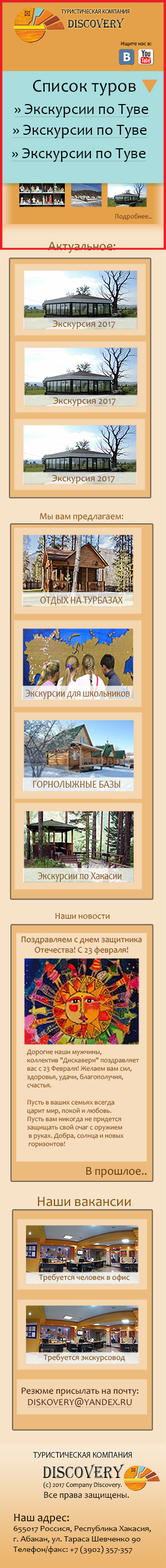
<style>
.page{position:relative;width:166px;height:1568px}
.page>*{position:absolute;margin:0}
.t1{font:5.9px "MyriadPro-Regular";color:#201708;scale:0.91 1}
.t2{font:11.8px "Algerian";color:#201708;scale:0.91 1}
.t3{font:5.6px "Candara"}
.t4{font:18.1px "Candara";color:#000000}
.t5{font:15.6px "Candara";color:#000000;text-decoration:underline}
.t6{font:6.9px "Candara";color:#753825}
.t7{font:12.8px "Candara";color:#824b00}
.t8{font:9.6px "Candara";color:#824b00}
.t9{font:9.4px "Candara";color:#824b00}
.t10{font:11px "Candara";color:#824b00;scale:0.8 1}
.t11{font:9px "Candara";color:#824b00}
.t12{font:8.7px "Candara";color:#824b00}
.t13{font:7px "Candara";color:#824b00}
.t14{font:11.8px "Candara";color:#673500}
.t15{font:14.3px "Candara";color:#824b00}
.t16{font:8px "Candara";color:#824b00}
.t17{font:9.6px "Candara";color:#370700}
.t18{font:9.6px "Candara";color:#4d2120;text-transform:uppercase;text-decoration:underline}
.t19{font:8.5px "MyriadPro-Regular";color:#23201c;scale:0.92 1}
.t20{font:17px "Algerian";color:#23201c;scale:0.92 1}
.t21{font:6.6px "Candara";color:#000000}
.t22{font:9.1px "Candara";color:#000000}
.t23{font:8.5px "Candara";color:#000000}
.t24{font:11.4px "Candara";color:#000000}
</style>
<div class="page">
<p class="t1" style="left:61px;top:9px;width:69px;height:20px;text-align:center">ТУРИСТИЧЕСКАЯ КОМПАНИЯ<br><span class="t2">DISCOVERY</span></p>
<p class="t3" style="left:121px;top:42px;width:31px;height:5px">Ищите нас в:</p>
<p class="t4" style="left:33px;top:80px;width:103px;height:16px">Список туров</p>
<p class="t5" style="left:14px;top:104px;width:136px;height:14px">» Экскурсии по Туве</p>
<p class="t5" style="left:12px;top:125px;width:136px;height:13px">» Экскурсии по Туве</p>
<p class="t5" style="left:11px;top:148px;width:136px;height:14px">» Экскурсии по Туве</p>
<p class="t6" style="left:115px;top:213px;width:37px;height:8px">Подробнее..</p>
<p class="t7" style="left:48px;top:242px;width:68px;height:11px">Актуальное:</p>
<p class="t8" style="left:53px;top:320px;width:62px;height:9px">Экскурсия 2017</p>
<p class="t8" style="left:54px;top:397px;width:62px;height:9px">Экскурсия 2017</p>
<p class="t8" style="left:52px;top:474px;width:63px;height:10px">Экскурсия 2017</p>
<p class="t9" style="left:40px;top:513px;width:84px;height:9px">Мы вам предлагаем:</p>
<p class="t10" style="left:41px;top:597px;width:82px;height:9px">ОТДЫХ НА ТУРБАЗАХ</p>
<p class="t10" style="left:25px;top:690px;width:105px;height:9px">Экскурсии для школьников</p>
<p class="t10" style="left:33px;top:781px;width:88px;height:7px">ГОРНОЛЫЖНЫЕ БАЗЫ</p>
<p class="t10" style="left:38px;top:872px;width:84px;height:10px">Экскурсии по Хакасии</p>
<p class="t11" style="left:55px;top:912px;width:55px;height:7px">Наши новости</p>
<p class="t12" style="left:21px;top:936px;width:122px;height:19px;text-align:center">Поздравляем с днем защитника<br>Отечества! С 23 февраля!</p>
<p class="t13" style="left:27px;top:1049px;width:112px;height:99px">Дорогие наши мужчины,<br>коллектив "Дискавери" поздравляет<br>вас с 23 Февраля! Желаем вам сил,<br>здоровья, удачи, благополучия,<br>счастья.<br><br>Пусть в ваших семьях всегда<br>царит мир, покой и любовь.<br>Пусть вам никогда не придется<br>защищать свой очаг с оружием<br> в руках. Добра, солнца и новых<br> горизонтов!</p>
<p class="t14" style="left:86px;top:1167px;width:61px;height:11px">В прошлое..</p>
<p class="t15" style="left:38px;top:1197px;width:93px;height:9px">Наши вакансии</p>
<p class="t16" style="left:39px;top:1274px;width:91px;height:8px">Требуется человек в офис</p>
<p class="t16" style="left:44px;top:1354px;width:81px;height:8px">Требуется экскурсовод</p>
<p class="t17" style="left:21px;top:1387px;width:118px;height:20px;text-align:center">Резюме присылать на почту:<br><span class="t18">diskovery@yandex.ru</span></p>
<p class="t19" style="left:33px;top:1452px;width:99px;height:28px;text-align:center">ТУРИСТИЧЕСКАЯ КОМПАНИЯ<br><span class="t20">DISCOVERY</span></p>
<p class="t21" style="left:43px;top:1482px;width:87px;height:18px">(c) 2017 Company Discovery.<br><span class="t22">Все права защищены.</span></p>
<p class="t23" style="left:13px;top:1513px;width:138px;height:41px"><span class="t24">Наш адрес:<br></span>655017 Россися, Республика Хакасия,<br>г. Абакан, ул. Тараса Шевченко 90<br>Телефон/факс: +7 (3902) 357-357</p>
</div>
